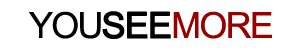
<style>
.page{position:relative;width:300px;height:50px;background:#ffffff}
.page>*{position:absolute;margin:0}
.t1{font:36px "ArialMT";letter-spacing:-0.05em;color:#990000;text-transform:uppercase}
.t2{font:36px "ArialMT";letter-spacing:-0.05em;color:#030303;text-transform:uppercase}
.t3{font:36px "ArialMT";letter-spacing:-0.05em;color:#030303;text-transform:uppercase;font-weight:bold}
</style>
<div class="page">
<p class="t1" style="left:29px;top:11px;width:243px;height:28px"><span class="t2">You</span><span class="t3">See</span>More</p>
</div>
